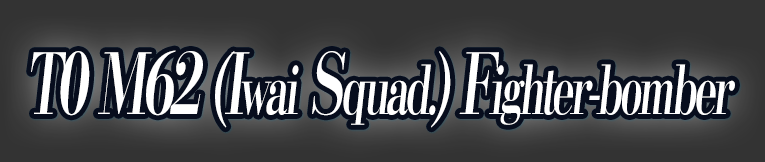
<style>
.page{position:relative;width:765px;height:162px;background:#333333}
.page>*{position:absolute;margin:0}
.t1{font:67.2px "KochoStd-Heavy";letter-spacing:-0.08em;color:#ffffff;font-style:italic;scale:0.62 1}
.t2{font:84px "KochoStd-Heavy";letter-spacing:-0.08em;color:#ffffff;font-style:italic;scale:0.62 1}
</style>
<div class="page">
<p class="t1" style="left:31px;top:50px;width:704px;height:78px"><span class="t2">T0 M62 (I</span>wai<span class="t2"> S</span>quad.<span class="t2">) F</span>ighter-bomber</p>
</div>
